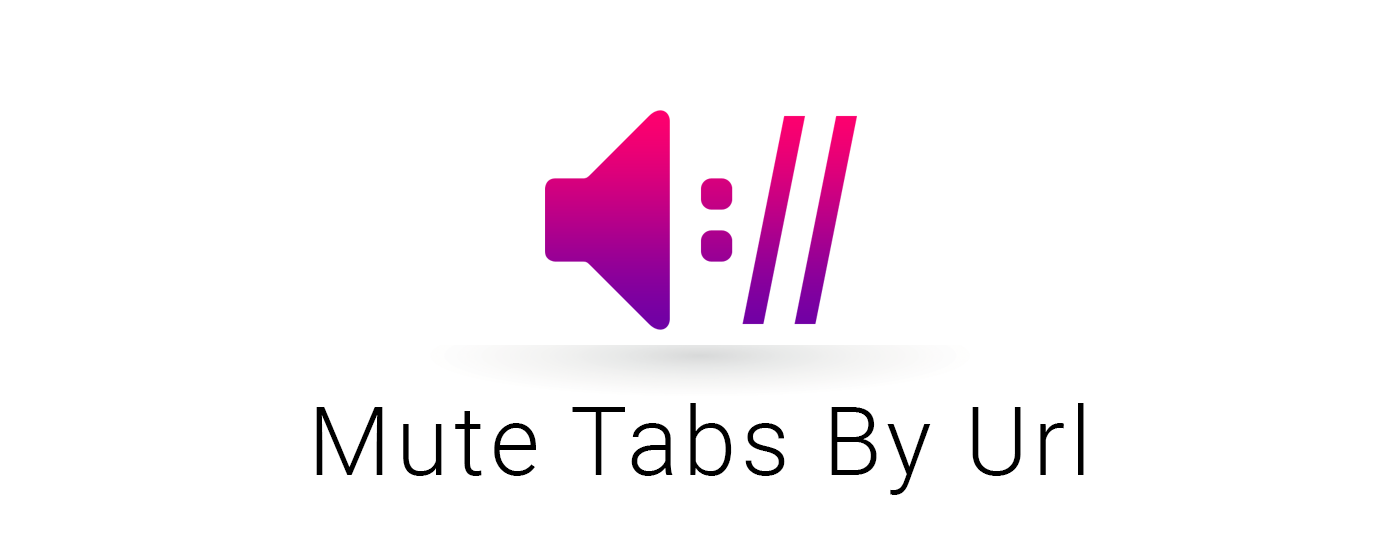
<style>
.page{position:relative;width:1400px;height:560px;background:#ffffff}
.page>*{position:absolute;margin:0}
.t1{font:96px "Roboto-Light";letter-spacing:0.05em;color:#000000}
</style>
<div class="page">
<p class="t1" style="left:316px;top:403px;width:768px;height:92px">Mute Tabs By Url</p>
</div>
